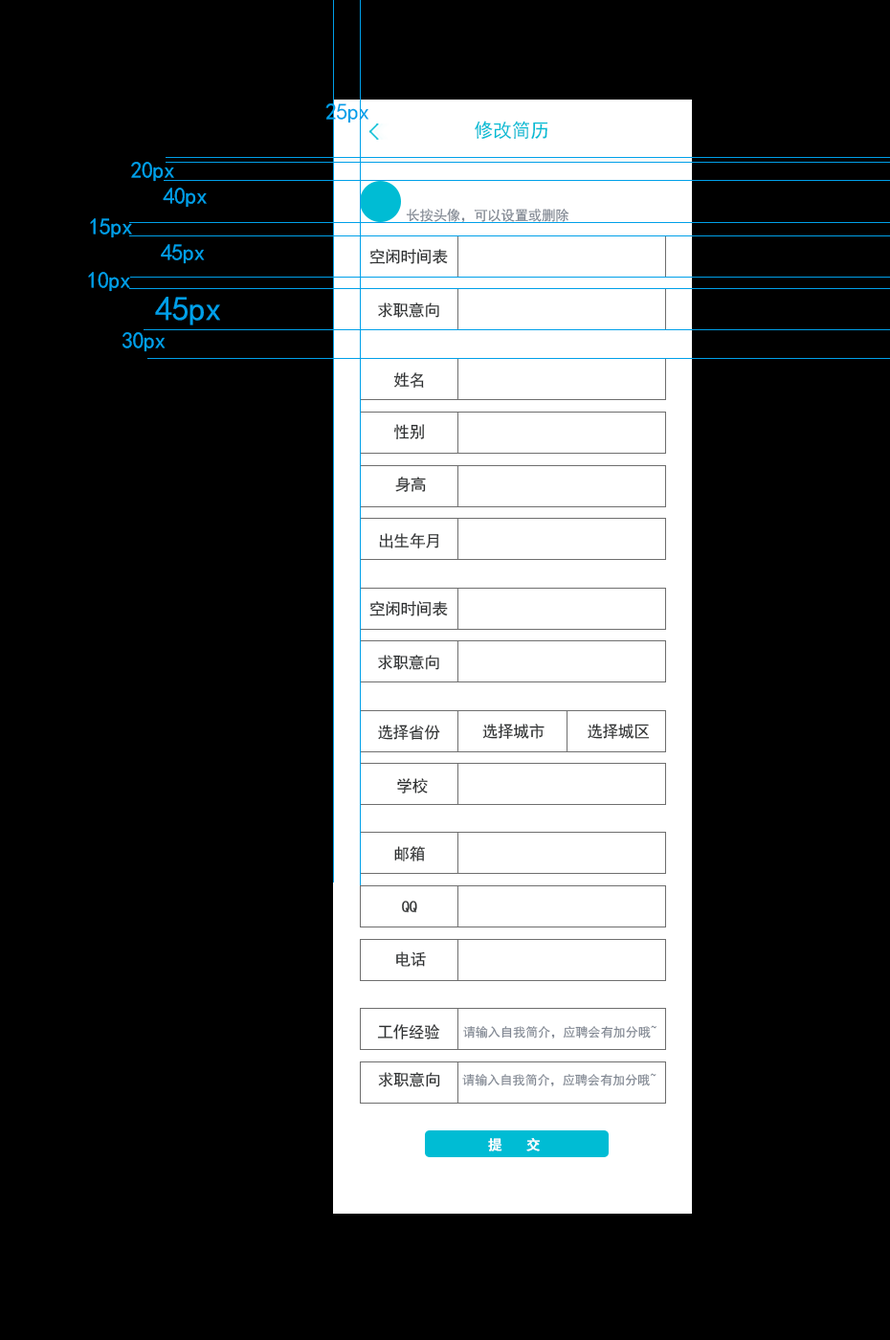
<style>
.page{position:relative;width:890px;height:1340px;background:#000000}
.page>*{position:absolute;margin:0}
.t1{font:23px "SimHei";letter-spacing:-0.02em;color:#00a0e9}
.t2{font:19.2px "SimHei";letter-spacing:-0.02em;color:#00bcd4}
.t3{font:13.8px "SimHei";letter-spacing:-0.02em;color:#808792}
.t4{font:16px "SimHei";letter-spacing:-0.02em;color:#2e3031}
.t5{font:34.5px "SimHei";letter-spacing:-0.02em;color:#00a0e9}
.t6{font:12.8px "SimHei";letter-spacing:-0.02em;color:#808792}
.t7{font:13.8px "SimHei";letter-spacing:0.02em;color:#ffffff;font-weight:bold}
</style>
<div class="page">
<p class="t1" style="left:325px;top:103px;width:44px;height:20px">25px</p>
<p class="t2" style="left:475px;top:121px;width:73px;height:19px">修改简历</p>
<p class="t1" style="left:131px;top:162px;width:43px;height:20px">20px</p>
<p class="t1" style="left:163px;top:188px;width:44px;height:20px">40px</p>
<p class="t3" style="left:406px;top:209px;width:163px;height:14px">长按头像，可以设置或删除</p>
<p class="t1" style="left:90px;top:218px;width:42px;height:20px">15px</p>
<p class="t1" style="left:161px;top:244px;width:44px;height:20px">45px</p>
<p class="t4" style="left:369px;top:249px;width:79px;height:15px">空闲时间表</p>
<p class="t1" style="left:88px;top:272px;width:42px;height:20px">10px</p>
<p class="t5" style="left:155px;top:297px;width:65px;height:28px">45px</p>
<p class="t4" style="left:378px;top:302px;width:61px;height:16px">求职意向</p>
<p class="t1" style="left:122px;top:332px;width:44px;height:20px">30px</p>
<p class="t4" style="left:393px;top:372px;width:31px;height:16px">姓名</p>
<p class="t4" style="left:393px;top:424px;width:32px;height:15px">性别</p>
<p class="t4" style="left:395px;top:477px;width:31px;height:15px">身高</p>
<p class="t4" style="left:379px;top:533px;width:60px;height:15px">出生年月</p>
<p class="t4" style="left:369px;top:601px;width:79px;height:15px">空闲时间表</p>
<p class="t4" style="left:378px;top:655px;width:61px;height:15px">求职意向</p>
<p class="t4" style="left:378px;top:724px;width:62px;height:16px">选择省份</p>
<p class="t4" style="left:482px;top:723px;width:63px;height:16px">选择城市</p>
<p class="t4" style="left:588px;top:723px;width:62px;height:16px">选择城区</p>
<p class="t4" style="left:397px;top:778px;width:31px;height:15px">学校</p>
<p class="t4" style="left:394px;top:846px;width:31px;height:15px">邮箱</p>
<p class="t4" style="left:402px;top:901px;width:15px;height:12px">QQ</p>
<p class="t4" style="left:396px;top:951px;width:30px;height:16px">电话</p>
<p class="t4" style="left:377px;top:1024px;width:63px;height:15px">工作经验</p>
<p class="t6" style="left:463px;top:1025px;width:194px;height:13px">请输入自我简介，应聘会有加分哦~</p>
<p class="t4" style="left:378px;top:1072px;width:62px;height:15px">求职意向</p>
<p class="t6" style="left:462px;top:1073px;width:195px;height:13px">请输入自我简介，应聘会有加分哦~</p>
<p class="t7" style="left:488px;top:1138px;width:52px;height:13px">提  交</p>
</div>
